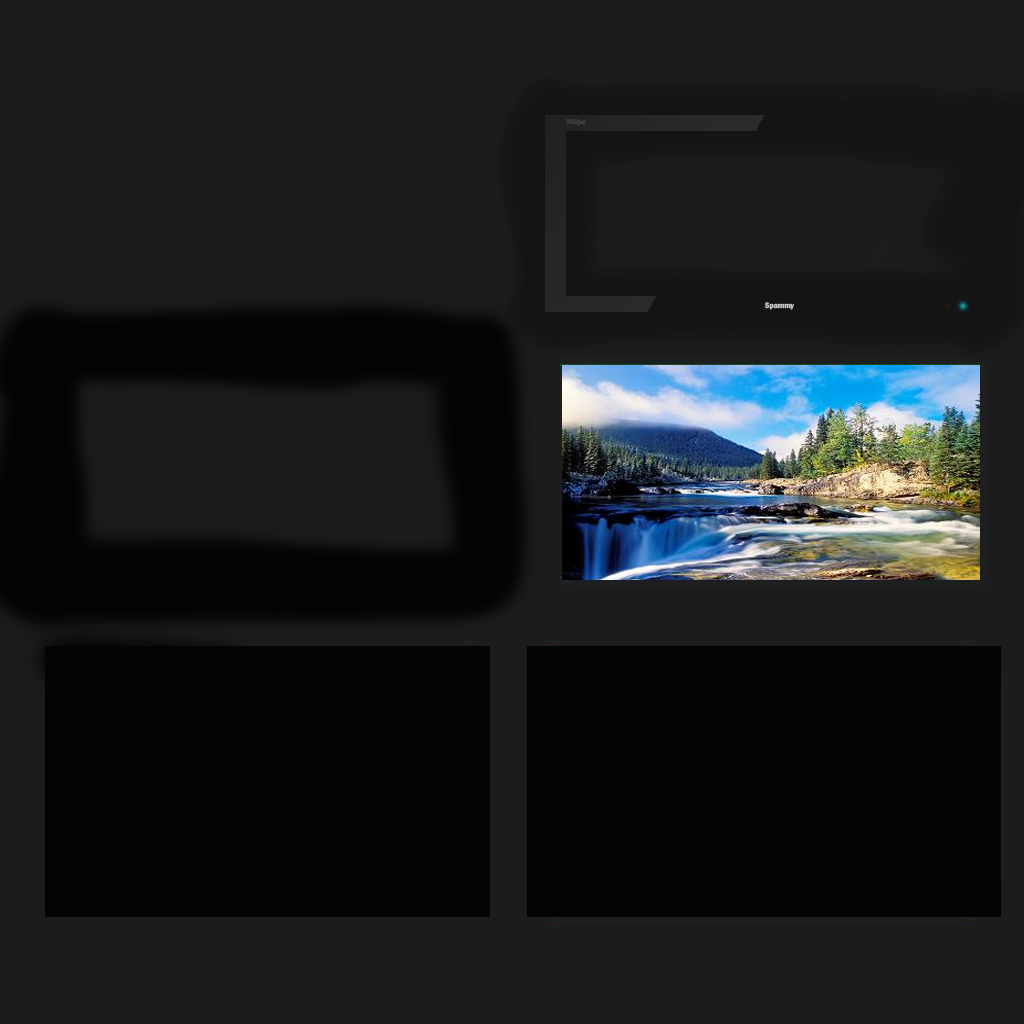
<style>
.page{position:relative;width:1024px;height:1024px;background:#1c1c1c}
.page>*{position:absolute;margin:0}
.t1{font:7px "FranklinGothic-Demi";color:#444444;scale:0.95 1}
.t2{font:7.9px "FranklinGothic-Demi";color:#cbcbcb}
</style>
<div class="page">
<p class="t1" style="left:565px;top:119px;width:20px;height:7px">392pq</p>
<p class="t2" style="left:764px;top:302px;width:30px;height:8px">Spammy</p>
</div>
